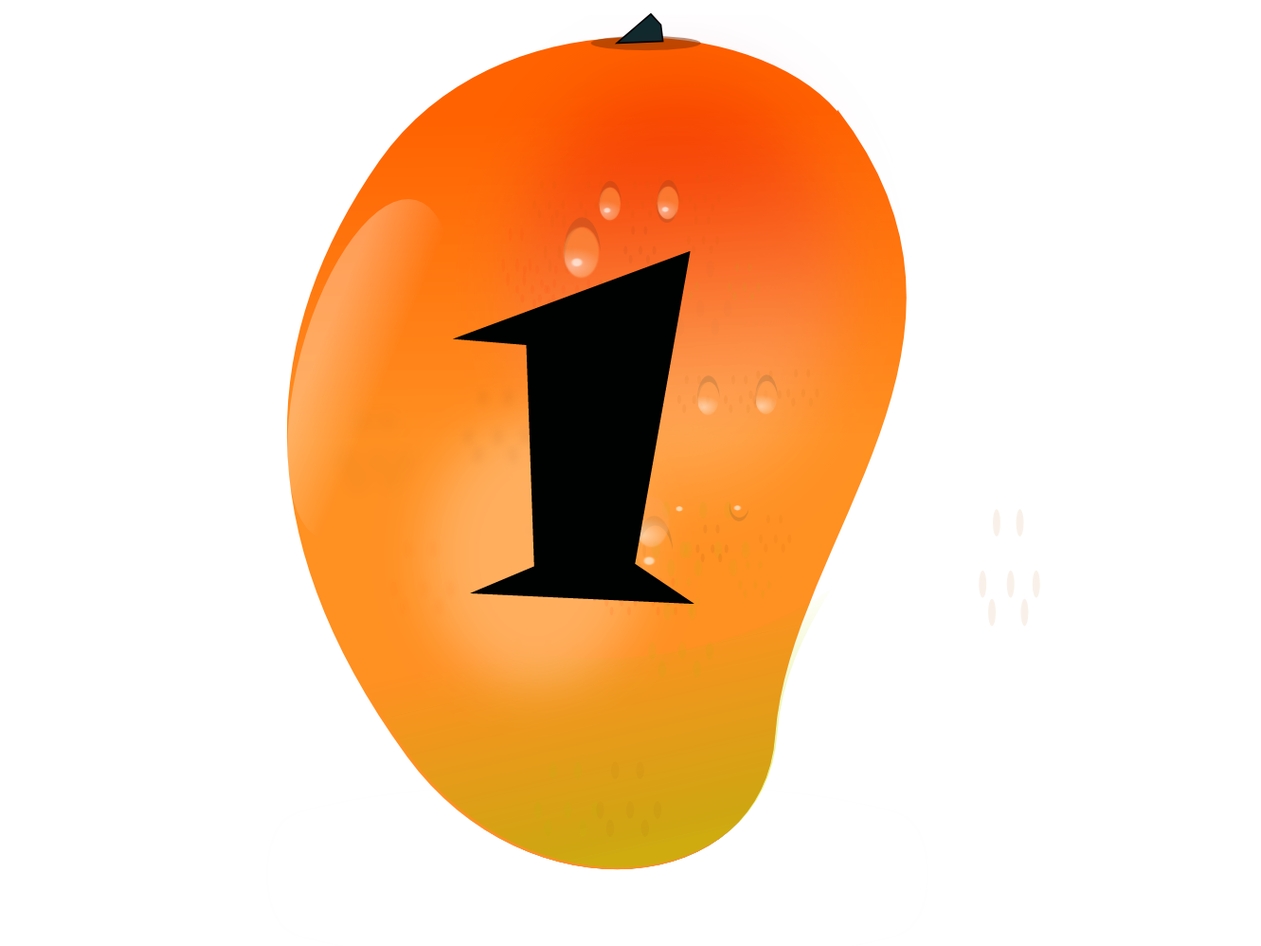
<style>
.page{position:relative;width:1261px;height:946px;background:#ffffff}
.page>*{position:absolute;margin:0}
.t1{font:473.7px "SnapITC-Regular";color:#000101}
</style>
<div class="page">
<p class="t1" style="left:453px;top:251px;width:241px;height:353px">1</p>
</div>
